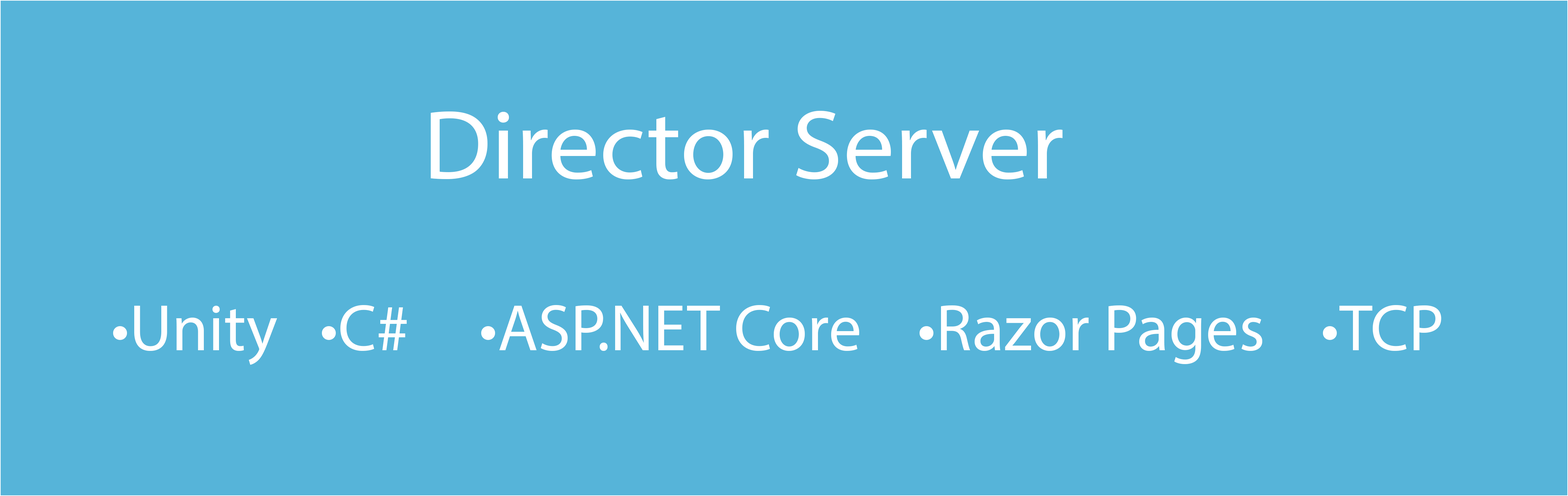
<style>
.page{position:relative;width:1568px;height:496px;background:#56b4d9}
.page>*{position:absolute;margin:0}
.t1{font:98.9px "MyriadPro-Regular";color:#ffffff;scale:1.04 1}
.t2{font:66px "MyriadPro-Regular";color:#ffffff}
</style>
<div class="page">
<p class="t1" style="left:431px;top:111px;width:632px;height:69px">Director Server</p>
<p class="t2" style="left:113px;top:305px;width:1328px;height:60px">•Unity   •C#     •ASP.NET Core    •Razor Pages    •TCP</p>
</div>
